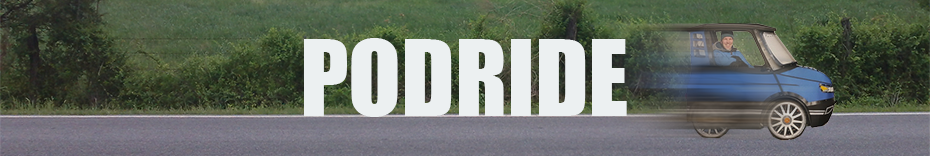
<style>
.page{position:relative;width:930px;height:156px}
.page>*{position:absolute;margin:0}
.t1{font:96.9px "Impact";color:#ecf0f1}
</style>
<div class="page">
<p class="t1" style="left:304px;top:38px;width:323px;height:79px">PODRIDE</p>
</div>
